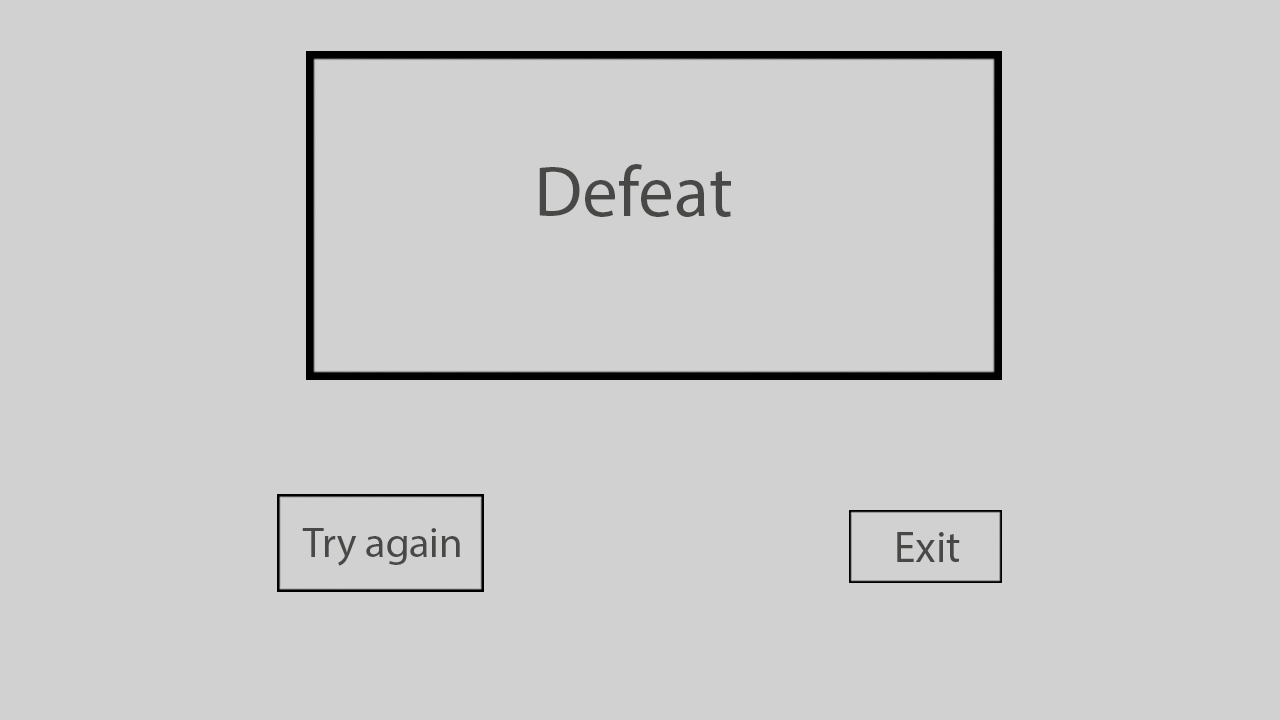
<style>
.page{position:relative;width:1280px;height:720px;background:#d1d1d1}
.page>*{position:absolute;margin:0}
.t1{font:72px "MyriadPro-Regular";color:#484846}
.t2{font:42px "MyriadPro-Regular";color:#484846}
.t3{font:43.8px "MyriadPro-Regular";color:#484846}
</style>
<div class="page">
<p class="t1" style="left:539px;top:164px;width:192px;height:53px">Defeat</p>
<p class="t2" style="left:302px;top:528px;width:158px;height:38px">Try again</p>
<p class="t3" style="left:897px;top:532px;width:63px;height:30px">Exit</p>
</div>
